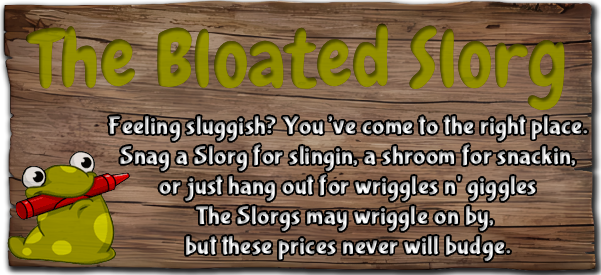
<style>
.page{position:relative;width:601px;height:275px}
.page>*{position:absolute;margin:0}
.t1{font:79.5px "Chewy-Regular";color:#8c8c00}
.t2{font:79.5px "Chewy-Regular";color:#8f8b00}
.t3{font:25.1px "BubblegumSans-Regular";font-weight:bold}
</style>
<div class="page">
<p class="t1" style="left:26px;top:23px;width:539px;height:88px">The Bloated Slorg</p>
<p class="t2" style="left:26px;top:23px;width:539px;height:88px">The Bloated Slorg</p>
<p class="t3" style="left:108px;top:116px;width:480px;height:145px;text-align:center">Feeling sluggish? You’ve come to the right place.<br>Snag a Slorg for slingin, a shroom for snackin,<br>or just hang out for wriggles n' giggles<br>The Slorgs may wriggle on by, <br>but these prices never will budge.</p>
</div>
